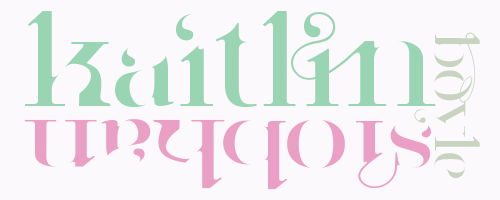
<style>
.page{position:relative;width:500px;height:200px;background:#fcf9fc}
.page>*{position:absolute;margin:0}
.t1{font:133px "ParisProRegularWhite";color:#99d4b3;scale:1.09 1}
.t2{font:62.6px "ParisProRegularWhite";color:#c8d4c0}
.t3{font:95.1px "ParisProRegularWhite";color:#e9a0c4;scale:1.26 1}
</style>
<div class="page">
<p class="t1" style="left:25px;top:11px;width:411px;height:97px">kaitlin</p>
<p class="t2" style="left:414px;top:32px;width:66px;height:146px;rotate:90deg">boyle</p>
<p class="t3" style="left:24px;top:119px;width:408px;height:71px;rotate:-180deg">siobhan</p>
</div>
